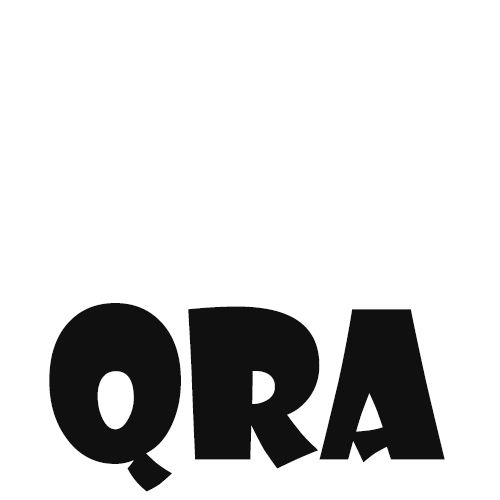
<style>
.page{position:relative;width:500px;height:500px;background:#ffffff}
.page>*{position:absolute;margin:0}
.t1{font:200px "ShowcardGothic-Reg";color:#101010}
</style>
<div class="page">
<p class="t1" style="left:49px;top:303px;width:396px;height:189px">QrA</p>
</div>
